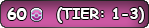
<style>
.page{position:relative;width:149px;height:28px}
.page>*{position:absolute;margin:0}
.t1{font:12px "ComicSansMS-Bold";color:#ffffff}
.t2{font:14.7px "ComicSansMS-Bold";color:#ffffff}
</style>
<div class="page">
<p class="t1" style="left:7px;top:8px;width:20px;height:12px">60</p>
<p class="t2" style="left:57px;top:7px;width:87px;height:16px">(TIER: 1-3)</p>
</div>
